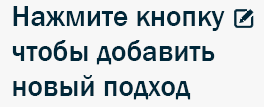
<style>
.page{position:relative;width:264px;height:107px;background:#f7f7f7}
.page>*{position:absolute;margin:0}
.t1{font:29.2px "FranklinGothic-Medium";color:#002739}
</style>
<div class="page">
<p class="t1" style="left:12px;top:6px;width:213px;height:94px">Нажмите кнопку<br>чтобы добавить <br>новый подход</p>
</div>
